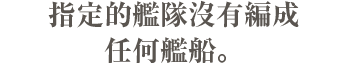
<style>
.page{position:relative;width:348px;height:63px;background:#ffffff}
.page>*{position:absolute;margin:0}
.t1{font:28px/36px "RyuminPr6N-ExBold";color:#5a5550}
</style>
<div class="page">
<p class="t1" style="left:48px;top:0px;width:251px;height:64px;text-align:center">指定的艦隊沒有編成<br>任何艦船。</p>
</div>
